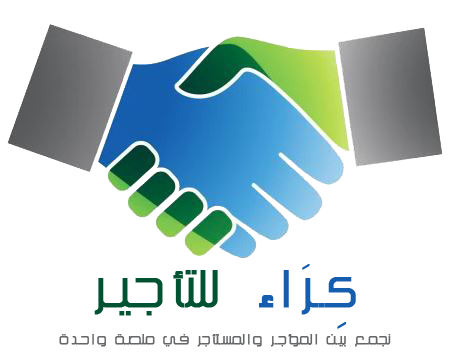
<style>
.page{position:relative;width:460px;height:356px;background:#ffffff}
.page>*{position:absolute;margin:0}
.t1{font:46.1px "KacstTitle";letter-spacing:0.12em;color:#005332;font-weight:bold}
.t2{font:46.1px "KacstTitle";letter-spacing:0.12em;color:#155daf;font-weight:bold}
.t3{font:12.8px "KacstTitle";letter-spacing:0.12em;color:#666769;font-weight:bold}
</style>
<div class="page">
<p class="t1" style="left:94px;top:264px;width:262px;height:65px"><span class="t2">كِرَاء </span>للتأجير</p>
<p class="t3" style="left:59px;top:334px;width:332px;height:13px">نجمع بين المؤجر والمستأجر في منصة واحدة</p>
</div>
